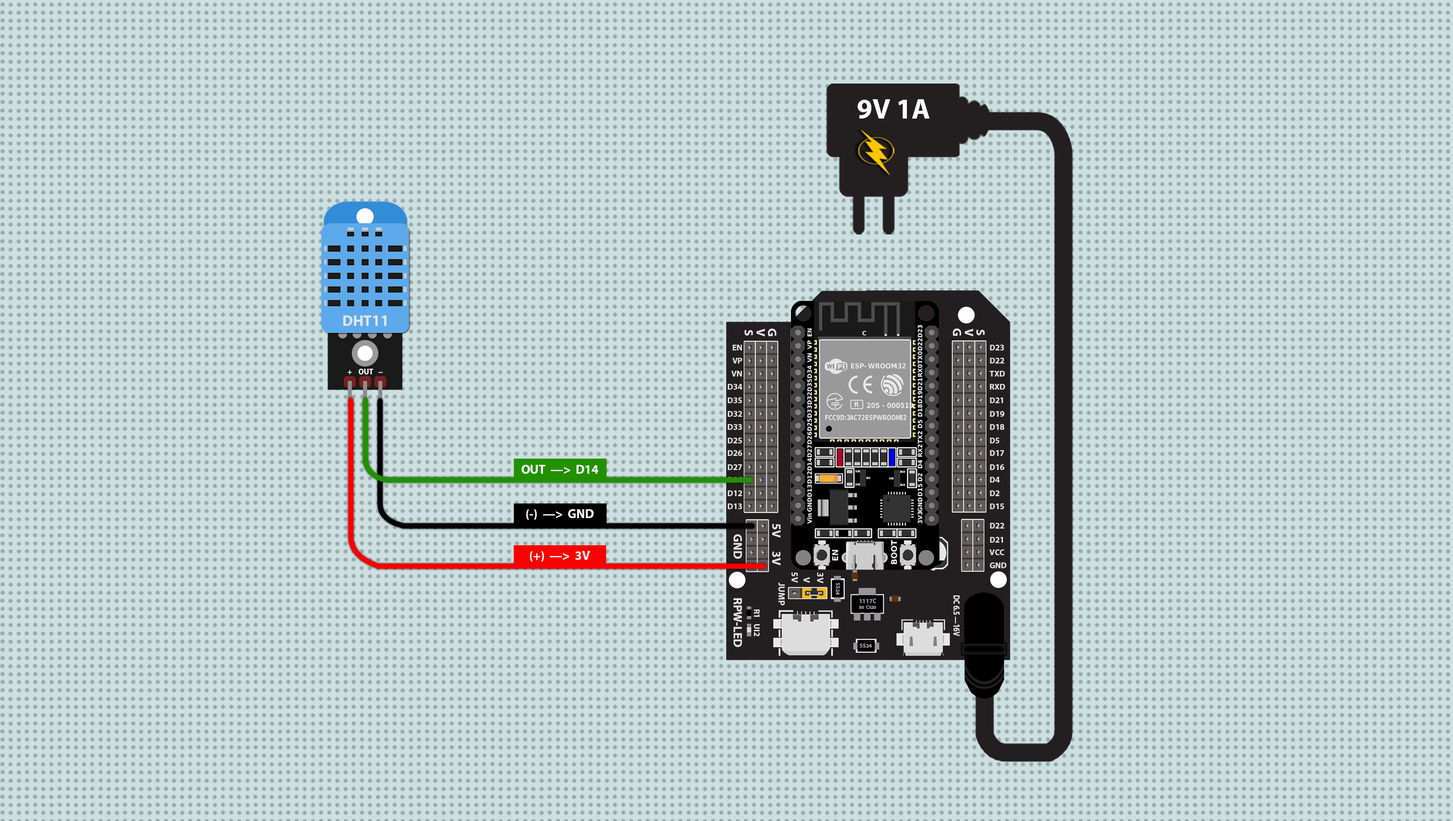
<style>
.page{position:relative;width:1453px;height:821px;background:#cce0e1}
.page>*{position:absolute;margin:0}
.t1{font:28.2px "MyriadPro-Bold";color:#ffffff}
.t2{font:26.6px "MyriadPro-Bold";color:#e5e5e5}
.t3{font:21.2px "MyriadPro-Bold";color:#e5e5e5}
.t4{font:14.4px "MyriadPro-Bold";color:#e5e5e5}
.t5{font:13.6px "MyriadPro-Bold";color:#ffffff;scale:0.95 1}
.t6{font:13.6px "MyriadPro-Bold";color:#ffffff;scale:2.01 1}
.t7{font:21.6px "MyriadPro-Bold";color:#ffffff}
.t8{font:15.6px "MyriadPro-Bold";color:#e5e5e5}
.t9{font:9.6px "MyriadPro-Bold";color:#9f9f9f}
.t10{font:8.3px/6.6px "MyriadPro-Bold";color:#9f9f9f;scale:0.96 1}
.t11{font:11px/6.6px "MyriadPro-Bold";color:#9f9f9f;scale:0.96 1}
.t12{font:15.6px "MyriadPro-Bold";color:#e5e5e5;scale:0.78 1}
</style>
<div class="page">
<p class="t1" style="left:857px;top:99px;width:73px;height:20px">9V 1A</p>
<p class="t2" style="left:343px;top:315px;width:43px;height:11px">DHT11</p>
<p class="t3" style="left:744px;top:329px;width:9px;height:7px;rotate:90deg">S</p>
<p class="t3" style="left:756px;top:328px;width:9px;height:8px;rotate:90deg">V</p>
<p class="t3" style="left:768px;top:328px;width:8px;height:8px;rotate:90deg">G</p>
<p class="t3" style="left:953px;top:328px;width:8px;height:8px;rotate:90deg">G</p>
<p class="t3" style="left:965px;top:328px;width:8px;height:8px;rotate:90deg">V</p>
<p class="t3" style="left:976px;top:329px;width:9px;height:6px;rotate:90deg">S</p>
<p class="t4" style="left:732px;top:345px;width:10px;height:5px">EN</p>
<p class="t4" style="left:990px;top:345px;width:14px;height:5px">D23</p>
<p class="t4" style="left:732px;top:358px;width:10px;height:5px">VP</p>
<p class="t4" style="left:990px;top:358px;width:14px;height:5px">D22</p>
<p class="t5" style="left:348px;top:370px;width:4px;height:4px">+</p>
<p class="t5" style="left:359px;top:369px;width:14px;height:5px">OUT</p>
<p class="t6" style="left:379px;top:372px;width:4px;height:1px">-</p>
<p class="t4" style="left:731px;top:371px;width:11px;height:5px">VN</p>
<p class="t4" style="left:989px;top:371px;width:16px;height:5px">TXD</p>
<p class="t4" style="left:728px;top:384px;width:14px;height:5px">D34</p>
<p class="t4" style="left:990px;top:384px;width:15px;height:5px">RXD</p>
<p class="t4" style="left:728px;top:397px;width:14px;height:6px">D35</p>
<p class="t4" style="left:990px;top:397px;width:13px;height:6px">D21</p>
<p class="t4" style="left:728px;top:411px;width:14px;height:6px">D32</p>
<p class="t4" style="left:990px;top:411px;width:14px;height:6px">D19</p>
<p class="t4" style="left:728px;top:424px;width:14px;height:6px">D33</p>
<p class="t4" style="left:990px;top:424px;width:14px;height:6px">D18</p>
<p class="t4" style="left:728px;top:438px;width:14px;height:5px">D25</p>
<p class="t4" style="left:990px;top:438px;width:9px;height:5px">D5</p>
<p class="t4" style="left:728px;top:450px;width:14px;height:6px">D26</p>
<p class="t4" style="left:990px;top:450px;width:14px;height:6px">D17</p>
<p class="t7" style="left:522px;top:465px;width:76px;height:9px">OUT  —&gt;  D14</p>
<p class="t4" style="left:728px;top:464px;width:14px;height:6px">D27</p>
<p class="t4" style="left:990px;top:464px;width:14px;height:6px">D16</p>
<p class="t4" style="left:990px;top:477px;width:10px;height:5px">D4</p>
<p class="t4" style="left:728px;top:490px;width:14px;height:6px">D12</p>
<p class="t4" style="left:990px;top:490px;width:10px;height:6px">D2</p>
<p class="t7" style="left:526px;top:509px;width:68px;height:10px">(-)  —&gt;  GND</p>
<p class="t4" style="left:728px;top:503px;width:14px;height:6px">D13</p>
<p class="t4" style="left:990px;top:503px;width:14px;height:6px">D15</p>
<p class="t3" style="left:772px;top:524px;width:9px;height:14px;rotate:90deg">5V</p>
<p class="t4" style="left:990px;top:523px;width:14px;height:5px">D22</p>
<p class="t3" style="left:734px;top:534px;width:8px;height:25px;rotate:90deg">GND</p>
<p class="t4" style="left:990px;top:537px;width:13px;height:5px">D21</p>
<p class="t7" style="left:530px;top:551px;width:60px;height:10px">(+)  —&gt;  3V</p>
<p class="t3" style="left:772px;top:551px;width:9px;height:14px;rotate:90deg">3V</p>
<p class="t4" style="left:989px;top:549px;width:15px;height:6px">VCC</p>
<p class="t4" style="left:990px;top:562px;width:17px;height:6px">GND</p>
<p class="t8" style="left:791px;top:572px;width:7px;height:11px;rotate:90deg">5V</p>
<p class="t8" style="left:803px;top:577px;width:7px;height:6px;rotate:90deg">V</p>
<p class="t8" style="left:817px;top:572px;width:6px;height:11px;rotate:90deg">3V</p>
<p class="t8" style="left:778px;top:582px;width:7px;height:23px;rotate:90deg">JUMP</p>
<p class="t9" style="left:836px;top:583px;width:4px;height:12px;rotate:90deg">SS24</p>
<p class="t3" style="left:734px;top:598px;width:8px;height:49px;rotate:90deg">RPW-LED</p>
<p class="t10" style="left:859px;top:598px;width:18px;height:11px;text-align:center"><span class="t11">1117C<br></span>50  C520</p>
<p class="t12" style="left:953px;top:595px;width:7px;height:41px;rotate:90deg">DC 6.5 —16V</p>
<p class="t4" style="left:754px;top:609px;width:6px;height:8px;rotate:90deg">R1</p>
<p class="t4" style="left:754px;top:624px;width:6px;height:12px;rotate:90deg">UI2</p>
<p class="t9" style="left:860px;top:643px;width:12px;height:4px">SS24</p>
</div>
